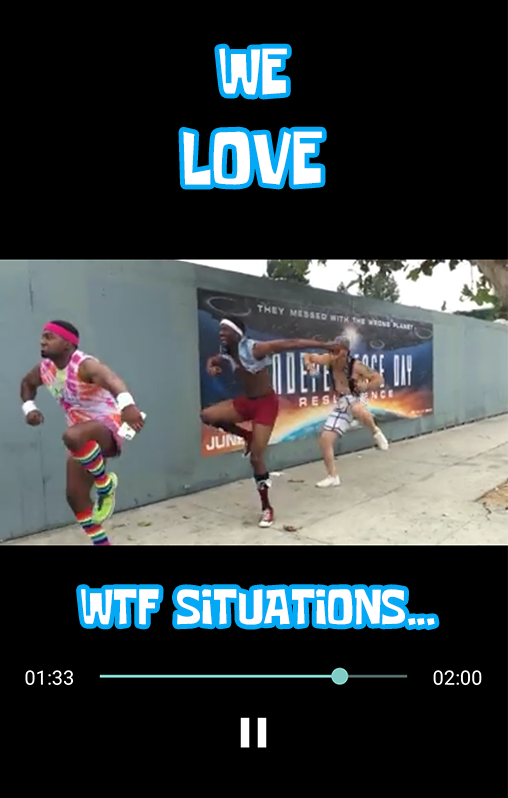
<style>
.page{position:relative;width:508px;height:798px;background:#000000}
.page>*{position:absolute;margin:0}
.t1{font:75px "SomeTimeLater";color:#ffffff}
.t2{font:65px "SomeTimeLater";color:#ffffff}
.t3{font:50px "SomeTimeLater";color:#ffffff}
</style>
<div class="page">
<p class="t1" style="left:183px;top:48px;width:139px;height:137px;text-align:center"><span class="t2">WE<br></span>LOVE</p>
<p class="t3" style="left:81px;top:589px;width:354px;height:37px">WTF SITUATIONS...</p>
</div>
